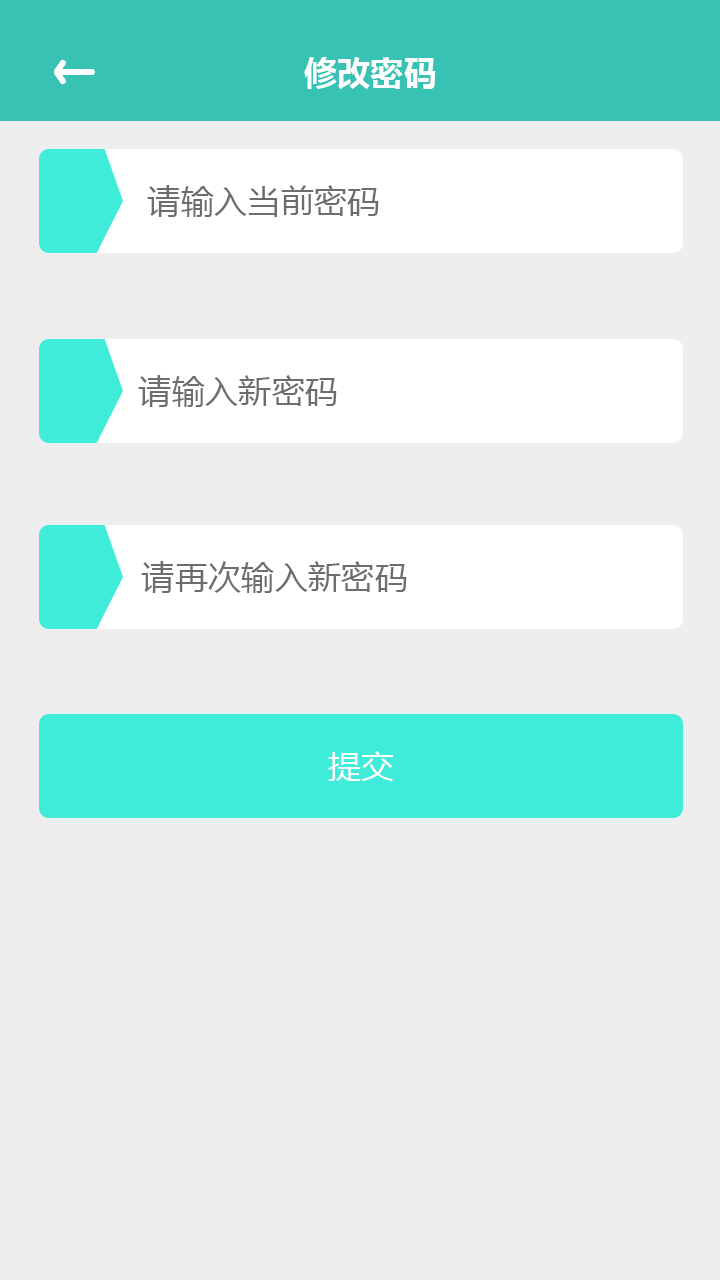
<style>
.page{position:relative;width:720px;height:1280px;background:#eeeeee}
.page>*{position:absolute;margin:0}
.t1{font:33.3px "MicrosoftYaHei-Bold";color:#fefefe}
.t2{font:33.3px "MicrosoftYaHei";color:#6d6d6d}
.t3{font:33.3px "MicrosoftYaHei";color:#fefefe}
</style>
<div class="page">
<p class="t1" style="left:304px;top:57px;width:132px;height:32px">修改密码</p>
<p class="t2" style="left:147px;top:185px;width:232px;height:32px">请输入当前密码</p>
<p class="t2" style="left:138px;top:375px;width:199px;height:32px">请输入新密码</p>
<p class="t2" style="left:141px;top:561px;width:266px;height:32px">请再次输入新密码</p>
<p class="t3" style="left:328px;top:751px;width:66px;height:30px">提交</p>
</div>
